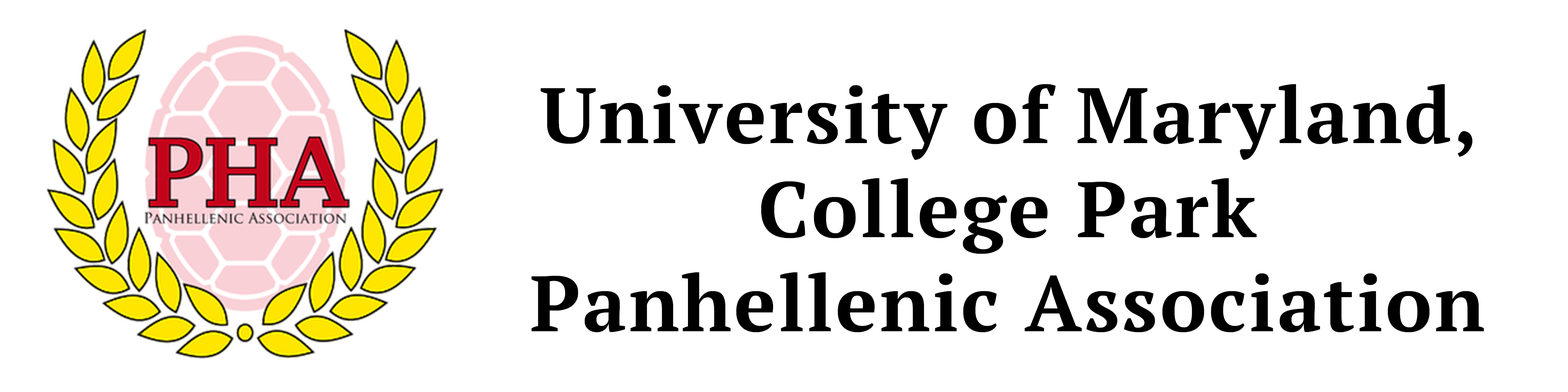
<style>
.page{position:relative;width:1568px;height:392px;background:#ffffff}
.page>*{position:absolute;margin:0}
.t1{font:78.4px "PTSerif-Bold";letter-spacing:0.03em;color:#000000}
.t2{font:65.3px "PTSerif-Regular";letter-spacing:0.03em;color:#000000}
</style>
<div class="page">
<p class="t1" style="left:531px;top:84px;width:953px;height:248px;text-align:center"><span class="t2"><br></span>University of Maryland, College Park<br>Panhellenic Association</p>
</div>
